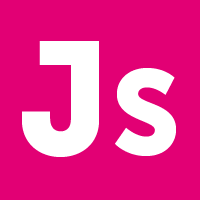
<style>
.page{position:relative;width:200px;height:200px;background:#e20074}
.page>*{position:absolute;margin:0}
.t1{font:160px "MuseoSans-900";color:#ffffff}
.t2{font:120px "MuseoSans-900";color:#ffffff}
</style>
<div class="page">
<p class="t1" style="left:22px;top:41px;width:154px;height:116px">J<span class="t2">S</span>20</p>
</div>
